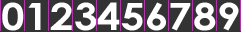
<style>
.page{position:relative;width:241px;height:32px;background:#333333}
.page>*{position:absolute;margin:0}
.t1{font:37.6px "CenturyGothic-Bold";letter-spacing:0.02em;color:#ffffff;scale:1.12 1}
</style>
<div class="page">
<p class="t1" style="left:2px;top:2px;width:237px;height:29px">0123456789</p>
</div>
